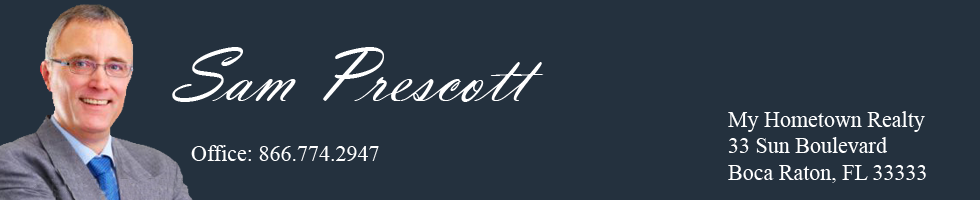
<style>
.page{position:relative;width:980px;height:200px;background:#24313e}
.page>*{position:absolute;margin:0}
.t1{font:79.2px "VladimirScript";color:#ffffff}
.t2{font:22px "TimesNewRomanPSMT";color:#ffffff}
</style>
<div class="page">
<p class="t1" style="left:172px;top:47px;width:372px;height:55px">Sam Prescott</p>
<p class="t2" style="left:728px;top:111px;width:198px;height:72px">My Hometown Realty<br>33 Sun Boulevard<br>Boca Raton, FL 33333</p>
<p class="t2" style="left:191px;top:145px;width:188px;height:16px">Office: 866.774.2947</p>
</div>
